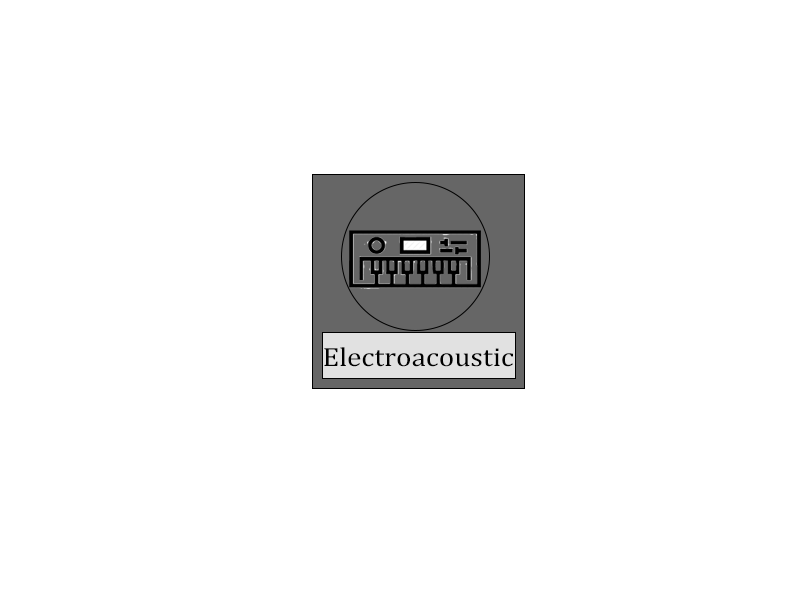
<style>
.page{position:relative;width:800px;height:600px;background:#ffffff}
.page>*{position:absolute;margin:0}
.t1{font:26.8px "CambriaMath";color:#000000;scale:1.09 1}
</style>
<div class="page">
<p class="t1" style="left:324px;top:347px;width:189px;height:20px">Electroacoustic</p>
</div>
